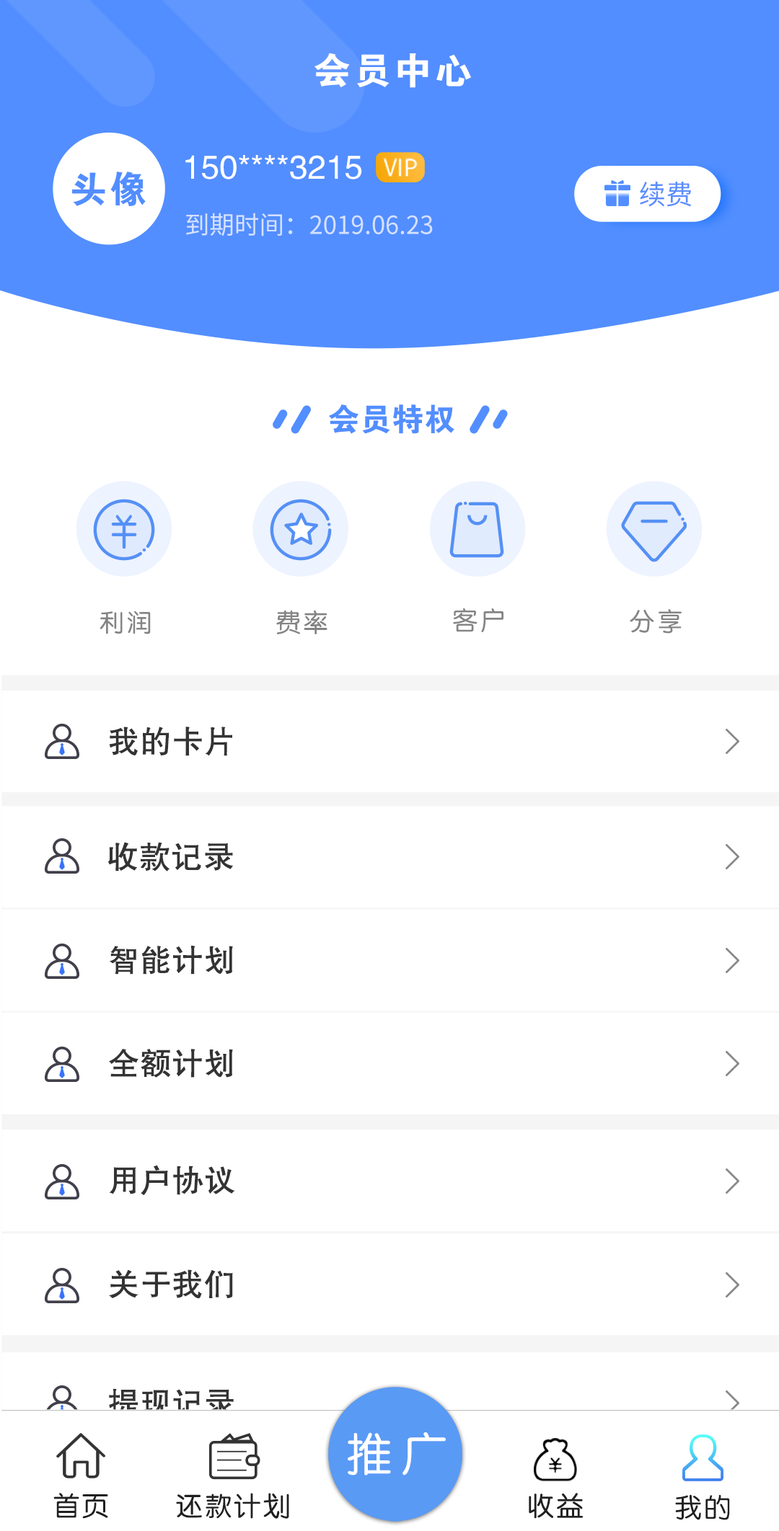
<style>
.page{position:relative;width:779px;height:1531px;background:#ffffff}
.page>*{position:absolute;margin:0}
.t1{font:37.4px "Jdahei";letter-spacing:0.08em;color:#ffffff}
.t2{font:33.2px "JHeiTi";color:#ffffff}
.t3{font:22.8px "SourceHanSansSC-Regular";color:#ffffff;text-transform:uppercase}
.t4{font:37.2px "Jdahei";letter-spacing:0.06em;color:#528eff}
.t5{font:27px "SourceHanSansCN-Regular";color:#5b8dfd;text-transform:uppercase}
.t6{font:24.9px "SourceHanSansCN-Regular";color:#d5e1ff}
.t7{font:31.9px "Jdahei";color:#528eff}
.t8{font:24.9px "JZunYuan";letter-spacing:0.1em;color:#848484}
.t9{font:31.1px "JHeiTi";color:#333333;font-weight:bold}
.t10{font:45.7px "JZunYuan";letter-spacing:0.2em;color:#ffffff}
.t11{font:26.8px "JZunYuan";letter-spacing:0.08em;color:#202020}
</style>
<div class="page">
<p class="t1" style="left:314px;top:53px;width:157px;height:35px">会员中心</p>
<p class="t2" style="left:185px;top:155px;width:177px;height:25px">150****3215</p>
<p class="t3" style="left:383px;top:158px;width:34px;height:19px">vip</p>
<p class="t4" style="left:72px;top:172px;width:74px;height:34px">头像</p>
<p class="t5" style="left:640px;top:182px;width:51px;height:25px">续费</p>
<p class="t6" style="left:186px;top:213px;width:247px;height:23px">到期时间：2019.06.23</p>
<p class="t7" style="left:329px;top:404px;width:125px;height:30px">会员特权</p>
<p class="t8" style="left:99px;top:611px;width:52px;height:23px">利润</p>
<p class="t8" style="left:276px;top:610px;width:51px;height:24px">费率</p>
<p class="t8" style="left:453px;top:608px;width:50px;height:24px">客户</p>
<p class="t8" style="left:629px;top:609px;width:52px;height:25px">分享</p>
<p class="t9" style="left:109px;top:727px;width:123px;height:29px">我的卡片</p>
<p class="t9" style="left:108px;top:842px;width:125px;height:30px">收款记录</p>
<p class="t9" style="left:110px;top:946px;width:123px;height:29px">智能计划</p>
<p class="t9" style="left:109px;top:1049px;width:124px;height:29px">全额计划</p>
<p class="t9" style="left:109px;top:1165px;width:126px;height:30px">用户协议</p>
<p class="t9" style="left:109px;top:1270px;width:124px;height:29px">关于我们</p>
<p class="t9" style="left:109px;top:1389px;width:125px;height:28px">提现记录</p>
<p class="t10" style="left:348px;top:1433px;width:98px;height:43px">推广</p>
<p class="t11" style="left:53px;top:1493px;width:55px;height:26px">首页</p>
<p class="t11" style="left:176px;top:1493px;width:113px;height:26px">还款计划</p>
<p class="t11" style="left:528px;top:1493px;width:55px;height:26px">收益</p>
<p class="t11" style="left:675px;top:1495px;width:55px;height:26px">我的</p>
</div>
